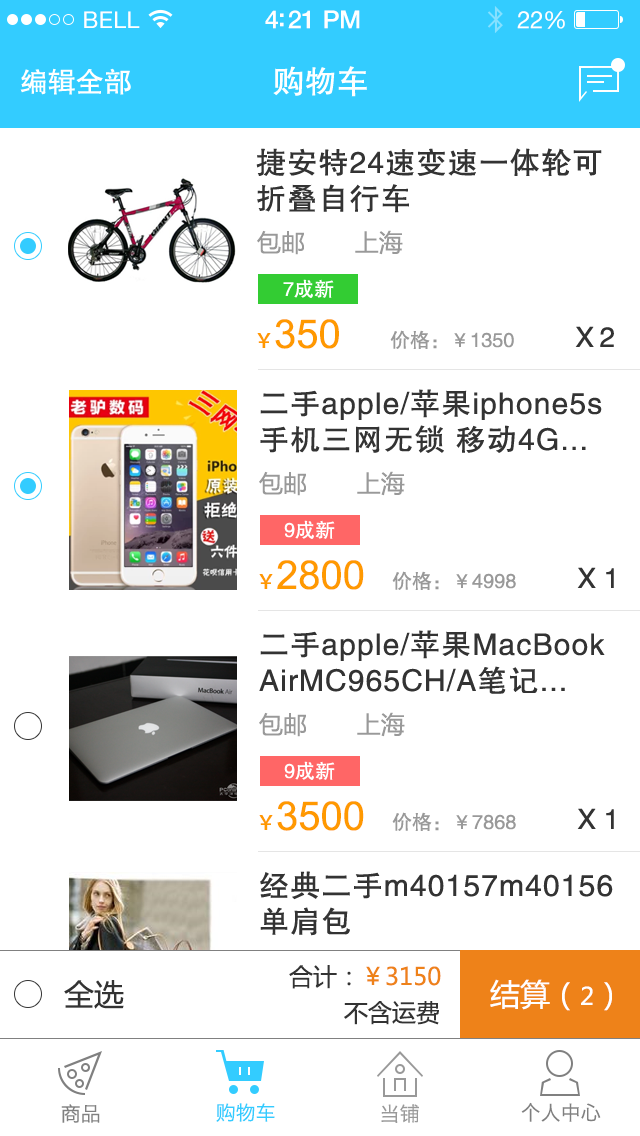
<style>
.page{position:relative;width:640px;height:1136px;background:#ffffff}
.page>*{position:absolute;margin:0}
.t1{font:23px "HelveticaNeue";letter-spacing:0.02em;color:#ffffff}
.t2{font:25px "HelveticaNeue-Medium";letter-spacing:-0.02em;color:#ffffff}
.t3{font:24px "HelveticaNeue";letter-spacing:-0.02em;color:#ffffff}
.t4{font:28px "FZHTJW--GB1-0";color:#ffffff}
.t5{font:32px "FZHTJW--GB1-0";color:#ffffff}
.t6{font:30px/36px "FZHTJW--GB1-0";letter-spacing:0.04em;color:#333333}
.t7{font:24px "MicrosoftYaHei";color:#999999}
.t8{font:20px "FZHTJW--GB1-0";color:#ffffff}
.t9{font:40px "ArialMT";color:#ff9900}
.t10{font:20px "AdobeHeitiStd-Regular";color:#ff9900}
.t11{font:20px "FZHTJW--GB1-0";color:#999999}
.t12{font:28px "FZHTJW--GB1-0";color:#333333}
.t13{font:24px "MicrosoftYaHei";color:#ee8219}
.t14{font:24px "MicrosoftYaHei";color:#333333}
.t15{font:30px "MicrosoftYaHei";color:#333333}
.t16{font:30px "MicrosoftYaHei";color:#ffffff}
.t17{font:24px "MicrosoftYaHei";color:#ffffff}
.t18{font:20px "MingHei_R";color:#808080}
.t19{font:20px "MingHei_R";color:#33ccff}
.t20{font:20px "MingHei_R";color:#999999}
</style>
<div class="page">
<p class="t1" style="left:84px;top:11px;width:56px;height:17px">BELL</p>
<p class="t2" style="left:265px;top:10px;width:95px;height:19px">4:21 PM</p>
<p class="t3" style="left:517px;top:11px;width:48px;height:18px">22%</p>
<p class="t4" style="left:20px;top:68px;width:111px;height:27px">编辑全部</p>
<p class="t5" style="left:273px;top:66px;width:94px;height:31px">购物车</p>
<p class="t6" style="left:256px;top:148px;width:346px;height:65px">捷安特24速变速一体轮可<br>折叠自行车</p>
<p class="t7" style="left:257px;top:230px;width:146px;height:25px">包邮       上海</p>
<p class="t8" style="left:283px;top:279px;width:51px;height:19px">7成新</p>
<p class="t9" style="left:257px;top:319px;width:82px;height:30px"><span class="t10">￥</span>350</p>
<p class="t11" style="left:390px;top:326px;width:224px;height:23px">价格：￥1350           <span class="t12">X 2</span></p>
<p class="t6" style="left:260px;top:389px;width:342px;height:64px">二手apple/苹果iphone5s<br>手机三网无锁 移动4G...</p>
<p class="t7" style="left:259px;top:471px;width:146px;height:25px">包邮       上海</p>
<p class="t8" style="left:284px;top:520px;width:51px;height:19px">9成新</p>
<p class="t9" style="left:259px;top:560px;width:105px;height:30px"><span class="t10">￥</span>2800</p>
<p class="t11" style="left:392px;top:567px;width:222px;height:23px">价格：￥4998           <span class="t12">X 1</span></p>
<p class="t6" style="left:259px;top:630px;width:346px;height:64px">二手apple/苹果MacBook<br>AirMC965CH/A笔记...</p>
<p class="t7" style="left:259px;top:712px;width:146px;height:25px">包邮       上海</p>
<p class="t8" style="left:284px;top:761px;width:51px;height:19px">9成新</p>
<p class="t9" style="left:259px;top:801px;width:105px;height:30px"><span class="t10">￥</span>3500</p>
<p class="t11" style="left:392px;top:808px;width:222px;height:23px">价格：￥7868           <span class="t12">X 1</span></p>
<p class="t6" style="left:260px;top:871px;width:353px;height:65px">经典二手m40157m40156<br>单肩包</p>
<p class="t13" style="left:289px;top:965px;width:152px;height:24px"><span class="t14">合计：</span>￥3150</p>
<p class="t15" style="left:64px;top:980px;width:60px;height:29px">全选</p>
<p class="t16" style="left:490px;top:979px;width:122px;height:32px">结算（<span class="t17">2</span>）</p>
<p class="t14" style="left:344px;top:1001px;width:95px;height:24px">不含运费</p>
<p class="t18" style="left:61px;top:1104px;width:39px;height:19px">商品</p>
<p class="t19" style="left:216px;top:1103px;width:59px;height:19px">购物车</p>
<p class="t20" style="left:381px;top:1104px;width:38px;height:19px">当铺</p>
<p class="t18" style="left:521px;top:1102px;width:80px;height:20px">个人中心</p>
</div>
